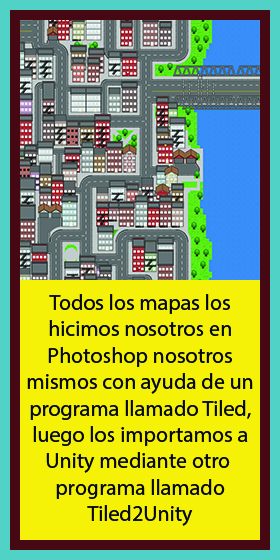
<style>
.page{position:relative;width:280px;height:560px;background:#f5f207}
.page>*{position:absolute;margin:0}
.t1{font:22px "MyriadPro-Regular";color:#060808}
</style>
<div class="page">
<p class="t1" style="left:27px;top:294px;width:226px;height:232px;text-align:center">Todos los mapas los<br>hicimos nosotros en<br>Photoshop nosotros<br>mismos con ayuda de un<br>programa llamado Tiled,<br>luego los importamos a<br>Unity mediante otro <br>programa llamado<br>Tiled2Unity</p>
</div>
